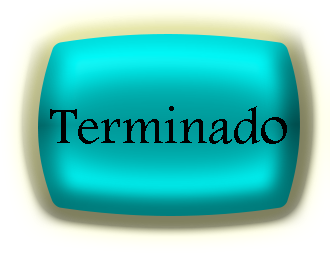
<style>
.page{position:relative;width:330px;height:263px}
.page>*{position:absolute;margin:0}
.t1{font:52.9px "FootlightMTLight";color:#000000}
.t2{font:58.2px "FootlightMTLight";color:#000000}
</style>
<div class="page">
<p class="t1" style="left:50px;top:106px;width:237px;height:38px">Terminad<span class="t2">o</span></p>
</div>
